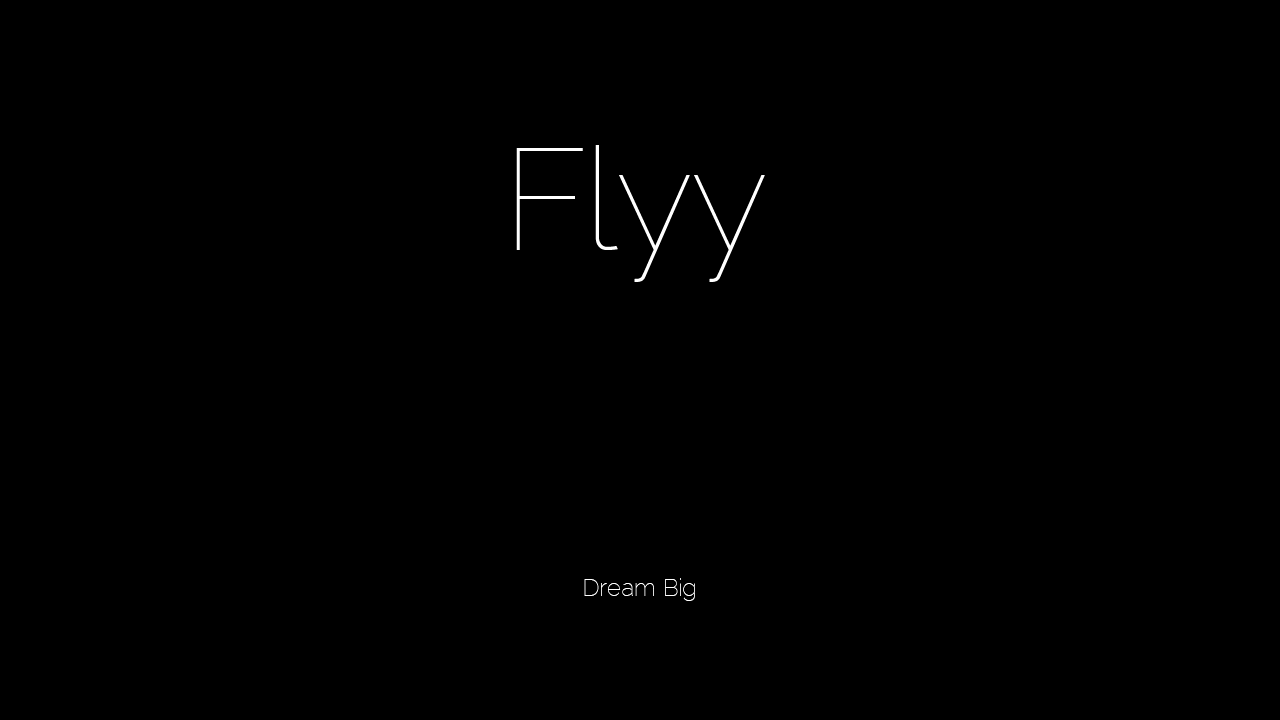
<style>
.page{position:relative;width:1280px;height:720px;background:#000000}
.page>*{position:absolute;margin:0}
.t1{font:144px "Raleway-Thin";color:#ffffff}
.t2{font:24px "Raleway-Thin";color:#ffffff}
</style>
<div class="page">
<p class="t1" style="left:516px;top:145px;width:249px;height:137px">Flyy</p>
<p class="t2" style="left:584px;top:578px;width:111px;height:23px">Dream Big</p>
</div>
